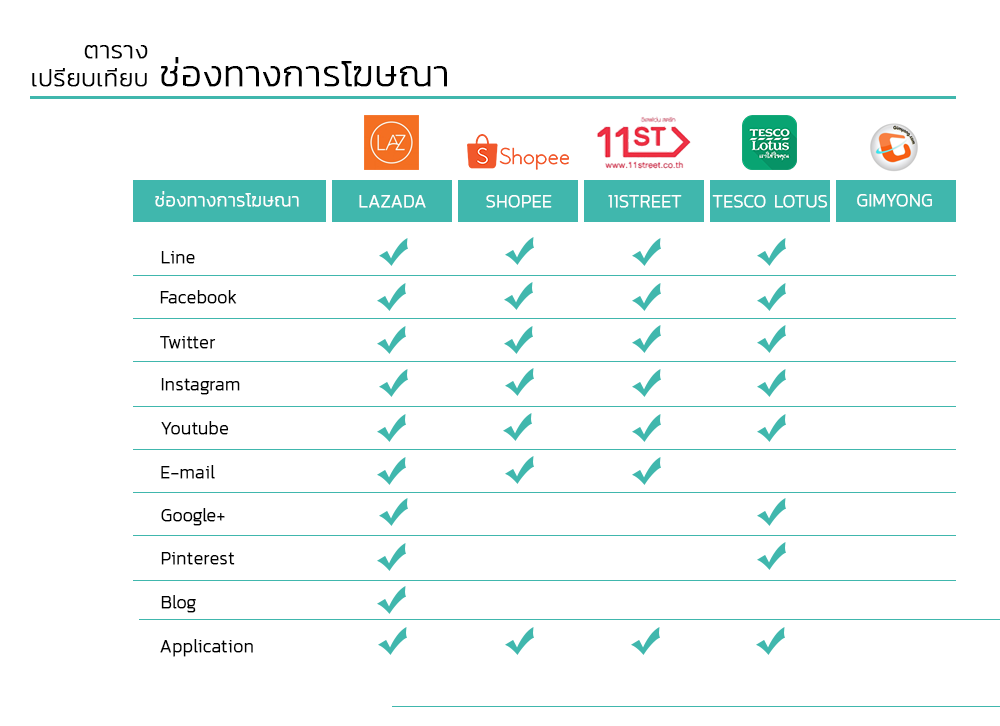
<style>
.page{position:relative;width:1000px;height:726px;background:#ffffff}
.page>*{position:absolute;margin:0}
.t1{font:24px/28px "Kanit-ExtraLight";color:#000000;font-weight:bold}
.t2{font:36px/28px "Kanit-ExtraLight";color:#000000;font-weight:bold}
.t3{font:18px "Kanit-ExtraLight";color:#ffffff;font-weight:bold}
.t4{font:18px "Kanit-ExtraLight";color:#000000;font-weight:bold}
</style>
<div class="page">
<p class="t1" style="left:32px;top:45px;width:415px;height:42px">ตาราง<br>เปรียบเทียบ <span class="t2">ช่องทางการโฆษณา</span></p>
<p class="t3" style="left:155px;top:191px;width:144px;height:16px">ช่องทางการโฆษณา</p>
<p class="t3" style="left:359px;top:195px;width:67px;height:13px">LAZADA</p>
<p class="t3" style="left:486px;top:195px;width:66px;height:13px">SHOPEE</p>
<p class="t3" style="left:608px;top:195px;width:74px;height:13px">11STREET</p>
<p class="t3" style="left:712px;top:195px;width:116px;height:13px">TESCO LOTUS</p>
<p class="t3" style="left:857px;top:194px;width:75px;height:13px">GIMYONG</p>
<p class="t4" style="left:161px;top:251px;width:34px;height:13px">Line</p>
<p class="t4" style="left:160px;top:290px;width:77px;height:14px">Facebook</p>
<p class="t4" style="left:160px;top:336px;width:56px;height:13px">Twitter</p>
<p class="t4" style="left:161px;top:378px;width:79px;height:17px">Instagram</p>
<p class="t4" style="left:161px;top:421px;width:68px;height:14px">Youtube</p>
<p class="t4" style="left:161px;top:465px;width:54px;height:14px">E-mail</p>
<p class="t4" style="left:161px;top:508px;width:64px;height:18px">Google+</p>
<p class="t4" style="left:161px;top:552px;width:74px;height:13px">Pinterest</p>
<p class="t4" style="left:161px;top:595px;width:35px;height:18px">Blog</p>
<p class="t4" style="left:160px;top:639px;width:93px;height:18px">Application</p>
</div>
